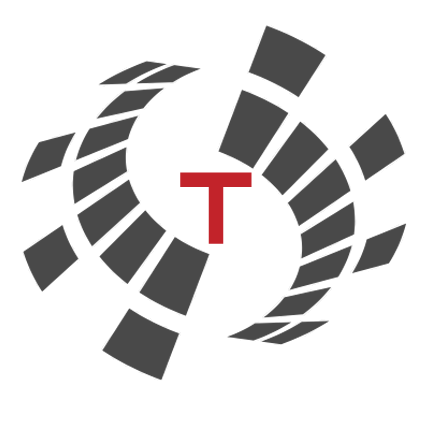
<style>
.page{position:relative;width:425px;height:425px;background:#ffffff}
.page>*{position:absolute;margin:0}
.t1{font:227.3px "InversionzUnboxed";color:#c2232a}
</style>
<div class="page">
<p class="t1" style="left:180px;top:172px;width:72px;height:72px">t</p>
</div>
